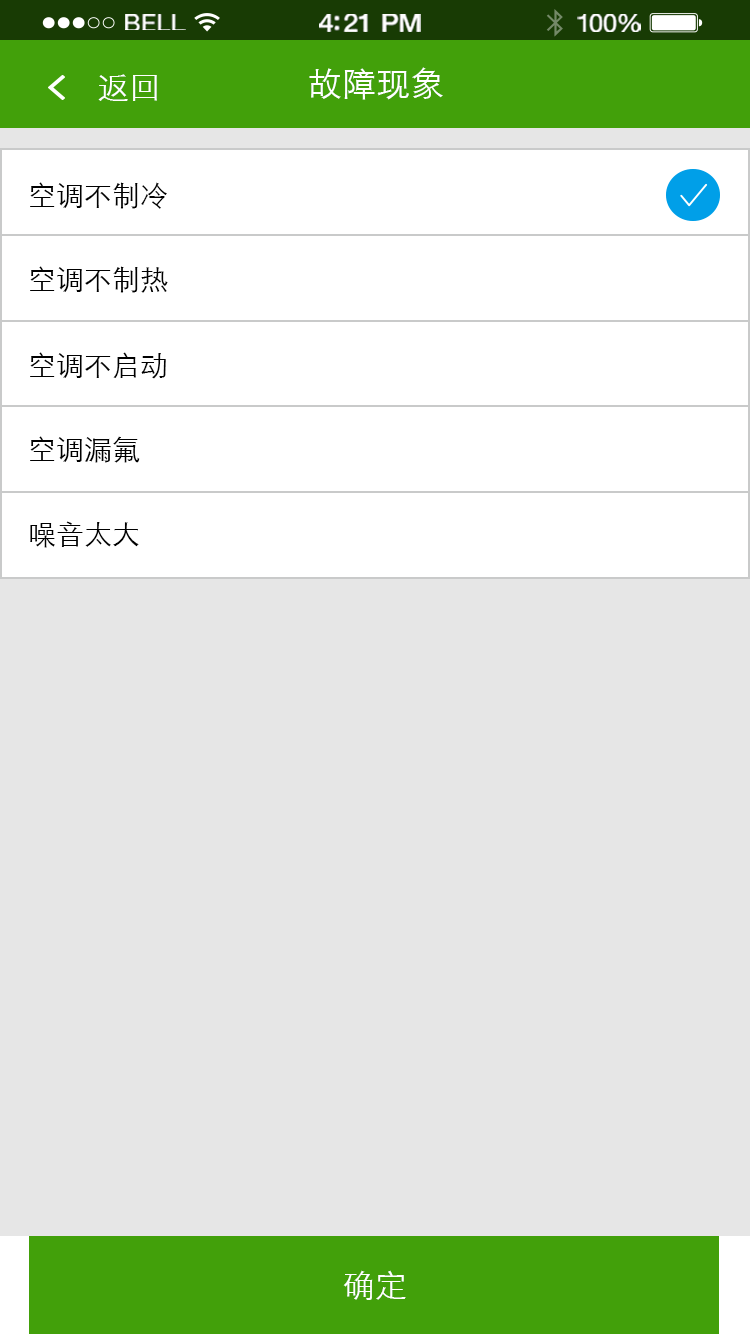
<style>
.page{position:relative;width:750px;height:1334px;background:#e6e6e6}
.page>*{position:absolute;margin:0}
.t1{font:23.3px "HelveticaNeue";letter-spacing:0.02em;color:#ffffff;scale:1.06 1}
.t2{font:25.3px "HelveticaNeue-Medium";letter-spacing:-0.02em;color:#ffffff;scale:1.06 1}
.t3{font:24.3px "HelveticaNeue";letter-spacing:-0.02em;color:#ffffff;scale:1.06 1}
.t4{font:32px "STXihei";color:#ffffff}
.t5{font:34px "STXihei";color:#ffffff}
.t6{font:28px "STXihei";color:#000000}
</style>
<div class="page">
<p class="t1" style="left:125px;top:14px;width:61px;height:16px">BELL</p>
<p class="t2" style="left:319px;top:14px;width:102px;height:18px">4:21 PM</p>
<p class="t3" style="left:577px;top:14px;width:64px;height:18px">100%</p>
<p class="t4" style="left:98px;top:74px;width:59px;height:27px">返回</p>
<p class="t5" style="left:309px;top:67px;width:134px;height:33px">故障现象</p>
<p class="t6" style="left:30px;top:182px;width:137px;height:27px">空调不制冷</p>
<p class="t6" style="left:30px;top:266px;width:138px;height:27px">空调不制热</p>
<p class="t6" style="left:30px;top:352px;width:136px;height:27px">空调不启动</p>
<p class="t6" style="left:30px;top:436px;width:110px;height:27px">空调漏氟</p>
<p class="t6" style="left:30px;top:521px;width:109px;height:27px">噪音太大</p>
<p class="t4" style="left:343px;top:1270px;width:63px;height:30px">确定</p>
</div>
